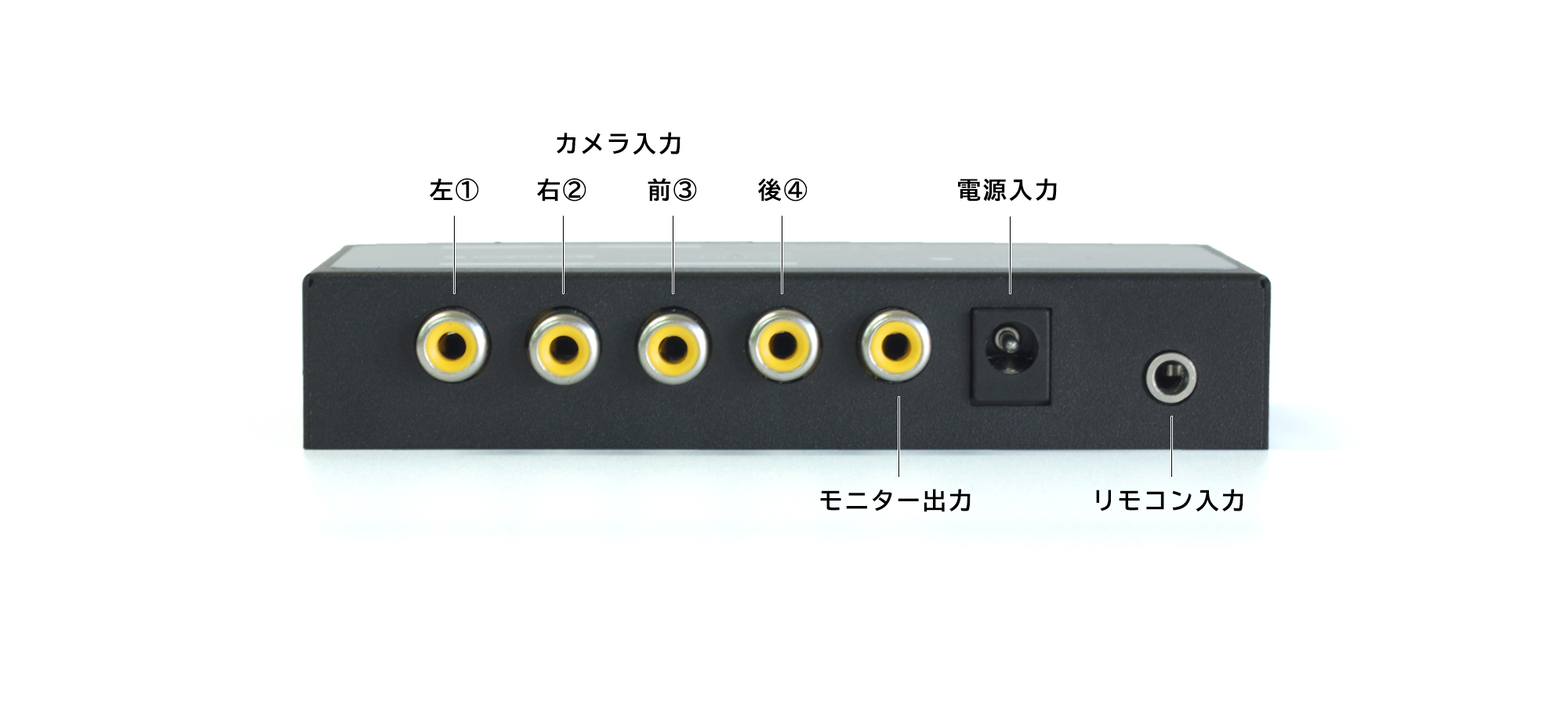
<style>
.page{position:relative;width:1568px;height:706px;background:#ffffff}
.page>*{position:absolute;margin:0}
.t1{font:23.5px "TBUDGoStd-Bold";letter-spacing:0.1em;color:#000000}
</style>
<div class="page">
<p class="t1" style="left:557px;top:132px;width:124px;height:22px">カメラ入力</p>
<p class="t1" style="left:430px;top:178px;width:49px;height:23px">左①</p>
<p class="t1" style="left:537px;top:178px;width:49px;height:23px">右②</p>
<p class="t1" style="left:648px;top:178px;width:49px;height:23px">前③</p>
<p class="t1" style="left:758px;top:178px;width:50px;height:23px">後④</p>
<p class="t1" style="left:958px;top:178px;width:99px;height:23px">電源入力</p>
<p class="t1" style="left:820px;top:488px;width:151px;height:24px">モニター出力</p>
<p class="t1" style="left:1096px;top:488px;width:147px;height:23px">リモコン入力</p>
</div>
